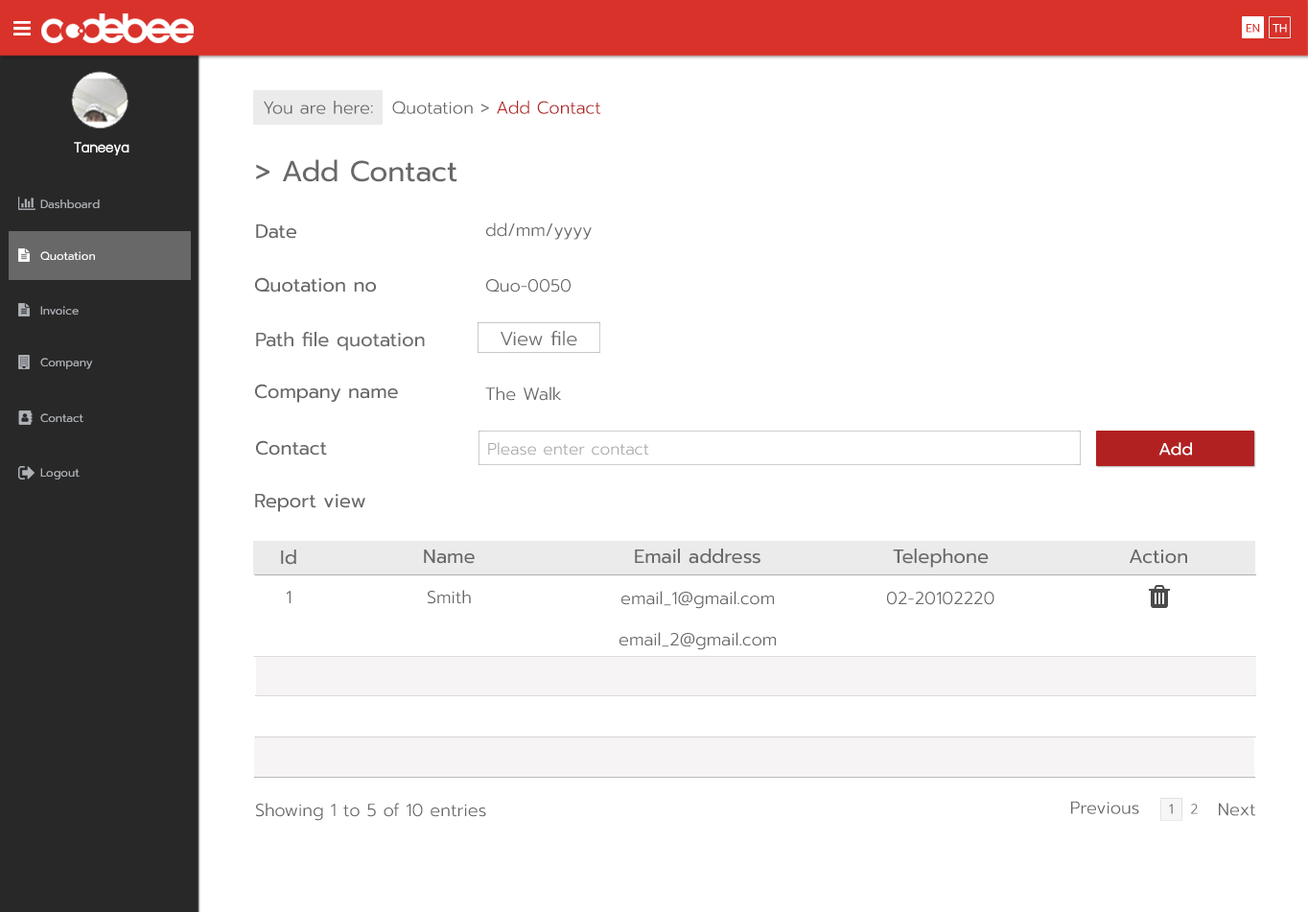
<style>
.page{position:relative;width:1308px;height:912px;background:#ffffff}
.page>*{position:absolute;margin:0}
.t1{font:11.5px "Prompt-Regular";color:#d8322b}
.t2{font:11.5px "Prompt-Regular";color:#ffffff}
.t3{font:17.3px "Prompt-Light";color:#686868}
.t4{font:17.3px "Prompt-Light";color:#b22121}
.t5{font:17.3px "supermarket";color:#ffffff}
.t6{font:28.8px "Prompt-Regular";color:#686868}
.t7{font:11.5px "Prompt-Regular";color:#aeb2b7}
.t8{font:19.2px "Prompt-Regular";color:#686868}
.t9{font:19.2px "Prompt-Light";color:#686868}
.t10{font:16.3px "Prompt-Light";color:#acacac}
.t11{font:16.8px "Prompt-Regular";color:#ffffff}
.t12{font:13.4px "Prompt-Light";color:#686868}
</style>
<div class="page">
<p class="t1" style="left:1245px;top:24px;width:15px;height:9px">EN</p>
<p class="t2" style="left:1272px;top:24px;width:15px;height:9px">TH</p>
<p class="t3" style="left:264px;top:101px;width:109px;height:13px">You are here:</p>
<p class="t3" style="left:392px;top:101px;width:209px;height:13px">Quotation &gt; <span class="t4">Add Contact</span></p>
<p class="t5" style="left:74px;top:142px;width:55px;height:13px">Taneeya</p>
<p class="t6" style="left:256px;top:159px;width:201px;height:23px">&gt; Add Contact</p>
<p class="t7" style="left:40px;top:199px;width:60px;height:10px">Dashboard</p>
<p class="t8" style="left:256px;top:224px;width:40px;height:15px">Date</p>
<p class="t3" style="left:486px;top:222px;width:106px;height:18px">dd/mm/yyyy</p>
<p class="t2" style="left:40px;top:251px;width:55px;height:10px">Quotation</p>
<p class="t8" style="left:255px;top:277px;width:121px;height:15px">Quotation no</p>
<p class="t3" style="left:486px;top:279px;width:84px;height:13px">Quo-0050</p>
<p class="t7" style="left:40px;top:306px;width:39px;height:9px">Invoice</p>
<p class="t8" style="left:256px;top:332px;width:169px;height:19px">Path file quotation</p>
<p class="t9" style="left:500px;top:331px;width:77px;height:15px">View file</p>
<p class="t7" style="left:40px;top:358px;width:53px;height:11px">Company</p>
<p class="t8" style="left:255px;top:384px;width:143px;height:19px">Company name</p>
<p class="t3" style="left:485px;top:386px;width:76px;height:15px">The Walk</p>
<p class="t7" style="left:40px;top:413px;width:43px;height:10px">Contact</p>
<p class="t8" style="left:256px;top:440px;width:71px;height:15px">Contact</p>
<p class="t10" style="left:488px;top:442px;width:161px;height:13px">Please enter contact</p>
<p class="t11" style="left:1158px;top:442px;width:34px;height:13px">Add</p>
<p class="t7" style="left:40px;top:468px;width:40px;height:11px">Logout</p>
<p class="t8" style="left:255px;top:494px;width:110px;height:18px">Report view</p>
<p class="t8" style="left:281px;top:549px;width:15px;height:16px">Id</p>
<p class="t8" style="left:424px;top:549px;width:51px;height:15px">Name</p>
<p class="t8" style="left:635px;top:548px;width:125px;height:16px">Email address</p>
<p class="t8" style="left:893px;top:548px;width:96px;height:20px">Telephone</p>
<p class="t8" style="left:1129px;top:549px;width:58px;height:15px">Action</p>
<p class="t3" style="left:287px;top:591px;width:4px;height:12px">1</p>
<p class="t3" style="left:428px;top:590px;width:43px;height:14px">Smith</p>
<p class="t3" style="left:621px;top:591px;width:153px;height:18px">email_1@gmail.com</p>
<p class="t3" style="left:887px;top:592px;width:107px;height:13px">02-20102220</p>
<p class="t3" style="left:619px;top:632px;width:157px;height:18px">email_2@gmail.com</p>
<p class="t3" style="left:256px;top:802px;width:230px;height:19px">Showing 1 to 5 of 10 entries</p>
<p class="t3" style="left:1071px;top:801px;width:68px;height:13px">Previous</p>
<p class="t12" style="left:1169px;top:803px;width:4px;height:11px">1</p>
<p class="t12" style="left:1191px;top:803px;width:7px;height:11px">2</p>
<p class="t3" style="left:1219px;top:802px;width:36px;height:14px">Next</p>
</div>
